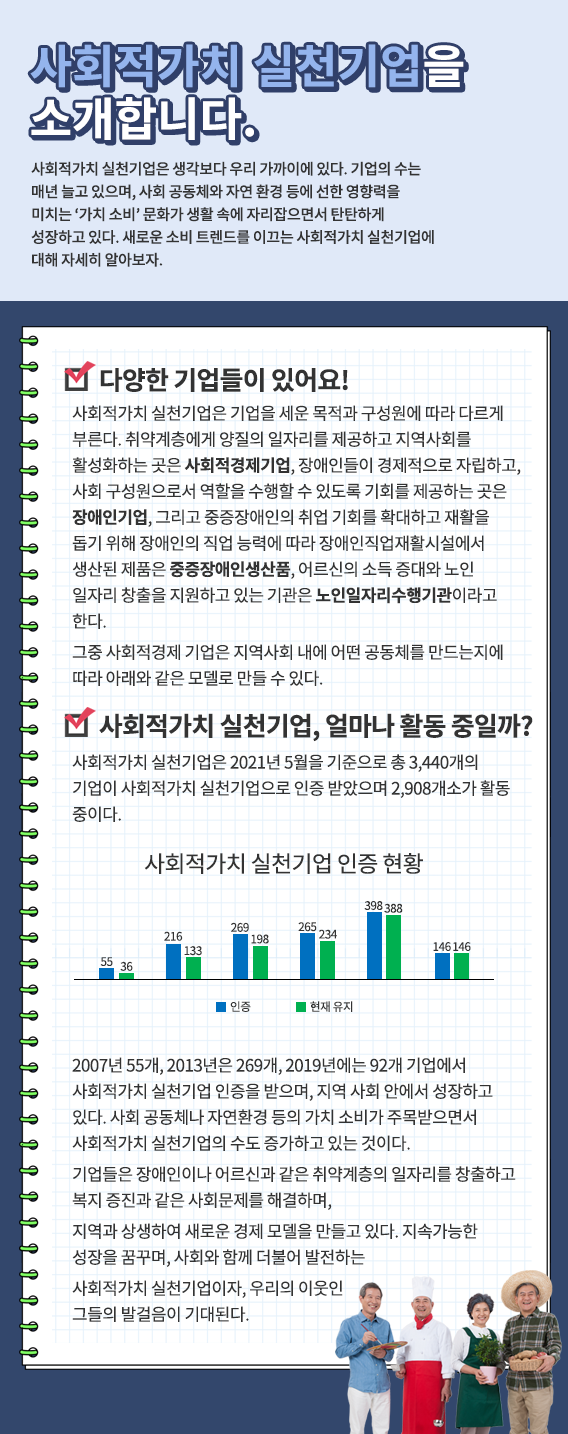
<style>
.page{position:relative;width:568px;height:1434px;background:#ffffff}
.page>*{position:absolute;margin:0}
.t1{font:46px/52.7px "NotoSansCJKkr-Bold";color:#94b4ed}
.t2{font:46px/52.7px "NotoSansCJKkr-Bold";color:#ffffff}
.t3{font:15.2px/22.8px "NotoSansCJKkr-Medium";letter-spacing:-0.03em;color:#333333}
.t4{font:25.8px "NotoSansCJKkr-Bold";letter-spacing:-0.03em;color:#333333}
.t5{font:17px/26px "NotoSansCJKkr-Regular";letter-spacing:-0.03em;color:#333333}
.t6{font:17px/26px "NotoSansCJKkr-Bold";letter-spacing:-0.03em;color:#333333}
.t7{font:22.8px "NotoSansCJKkr-Regular";letter-spacing:-0.03em;color:#333333}
.t8{font:11.6px "NotoSansCJKkr-Regular";letter-spacing:-0.03em;color:#333333}
</style>
<div class="page">
<p class="t1" style="left:30px;top:44px;width:434px;height:96px">사회적가치 실천기업<span class="t2">을<br>소개합니다.</span></p>
<p class="t3" style="left:31px;top:161px;width:403px;height:106px">사회적가치 실천기업은 생각보다 우리 가까이에 있다. 기업의 수는 매년 늘고 있으며, 사회 공동체와 자연 환경 등에 선한 영향력을 미치는 ‘가치 소비’ 문화가 생활 속에 자리잡으면서 탄탄하게 성장하고 있다. 새로운 소비 트렌드를 이끄는 사회적가치 실천기업에 대해 자세히 알아보자.</p>
<p class="t4" style="left:100px;top:368px;width:248px;height:24px">다양한 기업들이 있어요!</p>
<p class="t5" style="left:72px;top:405px;width:449px;height:281px">사회적가치 실천기업은 기업을 세운 목적과 구성원에 따라 다르게 부른다. 취약계층에게 양질의 일자리를 제공하고 지역사회를 활성화하는 곳은 <span class="t6">사회적경제기업</span>, 장애인들이 경제적으로 자립하고, 사회 구성원으로서 역할을 수행할 수 있도록 기회를 제공하는 곳은 <span class="t6">장애인기업</span>, 그리고 중증장애인의 취업 기회를 확대하고 재활을 돕기 위해 장애인의 직업 능력에 따라 장애인직업재활시설에서 생산된 제품은 <span class="t6">중증장애인생산품</span>, 어르신의 소득 증대와 노인 일자리 창출을 지원하고 있는 기관은 <span class="t6">노인일자리수행기관</span>이라고 한다.<br>　<br>그중 사회적경제 기업은 지역사회 내에 어떤 공동체를 만드는지에 따라 아래와 같은 모델로 만들 수 있다.</p>
<p class="t4" style="left:99px;top:713px;width:434px;height:29px">사회적가치 실천기업, 얼마나 활동 중일까?</p>
<p class="t5" style="left:72px;top:754px;width:438px;height:68px">사회적가치 실천기업은 2021년 5월을 기준으로 총 3,440개의 기업이 사회적가치 실천기업으로 인증 받았으며 2,908개소가 활동 중이다.</p>
<p class="t7" style="left:144px;top:853px;width:279px;height:21px">사회적가치 실천기업 인증 현황</p>
<p class="t8" style="left:364px;top:901px;width:19px;height:9px">398</p>
<p class="t8" style="left:384px;top:903px;width:19px;height:10px">388</p>
<p class="t8" style="left:231px;top:922px;width:18px;height:10px">269</p>
<p class="t8" style="left:298px;top:922px;width:19px;height:10px">265</p>
<p class="t8" style="left:319px;top:929px;width:18px;height:10px">234</p>
<p class="t8" style="left:164px;top:931px;width:19px;height:10px">216</p>
<p class="t8" style="left:251px;top:934px;width:18px;height:10px">198</p>
<p class="t8" style="left:433px;top:942px;width:18px;height:9px">146</p>
<p class="t8" style="left:453px;top:942px;width:18px;height:9px">146</p>
<p class="t8" style="left:184px;top:946px;width:18px;height:10px">133</p>
<p class="t8" style="left:100px;top:957px;width:13px;height:9px">55</p>
<p class="t8" style="left:120px;top:961px;width:13px;height:10px">36</p>
<p class="t8" style="left:230px;top:1001px;width:21px;height:11px">인증</p>
<p class="t8" style="left:310px;top:1001px;width:43px;height:11px">현재 유지</p>
<p class="t5" style="left:72px;top:1057px;width:444px;height:265px">2007년 55개, 2013년은 269개, 2019년에는 92개 기업에서 사회적가치 실천기업 인증을 받으며, 지역 사회 안에서 성장하고 있다. 사회 공동체나 자연환경 등의 가치 소비가 주목받으면서 사회적가치 실천기업의 수도 증가하고 있는 것이다.<br>　<br>기업들은 장애인이나 어르신과 같은 취약계층의 일자리를 창출하고 복지 증진과 같은 사회문제를 해결하며, <br>　<br>지역과 상생하여 새로운 경제 모델을 만들고 있다. 지속가능한 성장을 꿈꾸며, 사회와 함께 더불어 발전하는 <br>　<br>사회적가치 실천기업이자, 우리의 이웃인<br>그들의 발걸음이 기대된다.</p>
</div>
